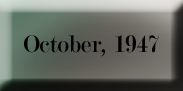
<style>
.page{position:relative;width:183px;height:91px}
.page>*{position:absolute;margin:0}
.t1{font:25.4px "Modern-Regular";color:#000000}
</style>
<div class="page">
<p class="t1" style="left:24px;top:35px;width:135px;height:22px">October, 1947</p>
</div>
